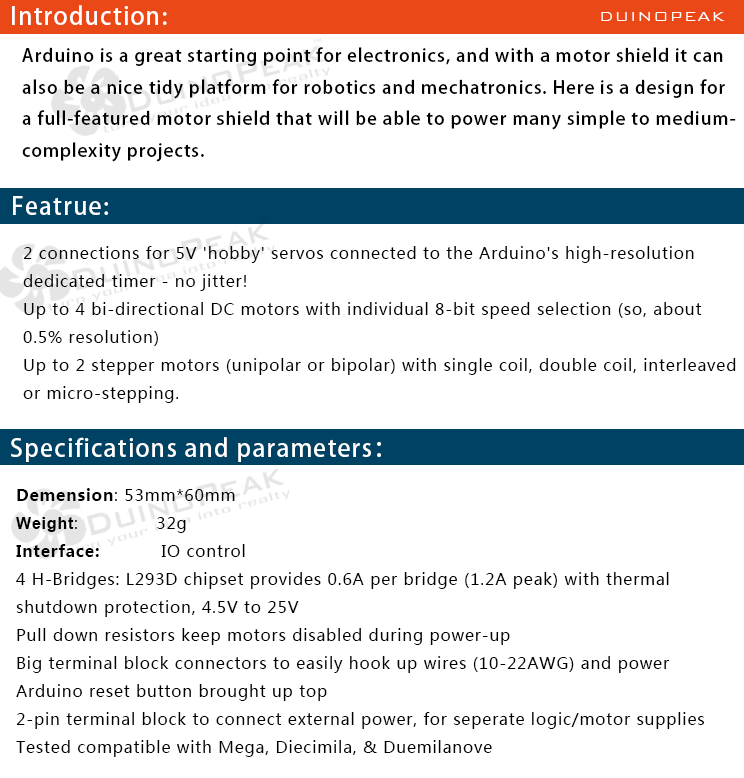
<style>
.page{position:relative;width:744px;height:778px;background:#ffffff}
.page>*{position:absolute;margin:0}
.t1{font:24px "AdobeHeitiStd-Regular";letter-spacing:0.05em;color:#ffffff}
.t2{font:18px "BankGothicBT-Light";letter-spacing:0.05em;color:#ffffff}
.t3{font:18px "AdobeHeitiStd-Regular";letter-spacing:0.05em;color:#000000}
.t4{font:16px "MicrosoftYaHei";letter-spacing:0.05em;color:#000000}
.t5{font:16px "MicrosoftYaHei-Bold";letter-spacing:0.05em;color:#000000}
.t6{font:16px "Arial-BoldMT";letter-spacing:0.05em;color:#000000}
</style>
<div class="page">
<p class="t1" style="left:12px;top:5px;width:155px;height:20px">Introduction:</p>
<p class="t2" style="left:601px;top:12px;width:124px;height:9px">DUINOPEAK</p>
<p class="t3" style="left:22px;top:47px;width:714px;height:115px">Arduino is a great starting point for electronics, and with a motor shield it can <br>also be a nice tidy platform for robotics and mechatronics. Here is a design for <br>a full-featured motor shield that will be able to power many simple to medium-<br>complexity projects.</p>
<p class="t1" style="left:13px;top:196px;width:95px;height:19px">Featrue:</p>
<p class="t4" style="left:23px;top:246px;width:713px;height:157px">2 connections for 5V 'hobby' servos connected to the Arduino's high-resolution <br>dedicated timer - no jitter!<br>Up to 4 bi-directional DC motors with individual 8-bit speed selection (so, about <br>0.5% resolution)<br>Up to 2 stepper motors (unipolar or bipolar) with single coil, double coil, interleaved <br>or micro-stepping.</p>
<p class="t1" style="left:11px;top:437px;width:370px;height:25px">Specifications and parameters：</p>
<p class="t4" style="left:16px;top:488px;width:689px;height:269px"><span class="t5">Demension</span>: 53mm*60mm<br><span class="t6">Weight</span>:              32g<br><span class="t5">Interface:           </span>IO control<br>4 H-Bridges: L293D chipset provides 0.6A per bridge (1.2A peak) with thermal <br>shutdown protection, 4.5V to 25V<br>Pull down resistors keep motors disabled during power-up<br>Big terminal block connectors to easily hook up wires (10-22AWG) and power<br>Arduino reset button brought up top<br>2-pin terminal block to connect external power, for seperate logic/motor supplies<br>Tested compatible with Mega, Diecimila, &amp; Duemilanove</p>
</div>
